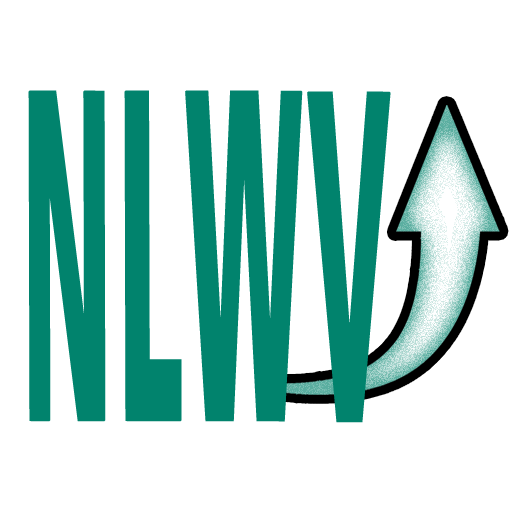
<style>
.page{position:relative;width:520px;height:520px;background:#ffffff}
.page>*{position:absolute;margin:0}
.t1{font:473.4px "Humanist777BT-BlackCondensedB";color:#01836d;font-weight:bold;scale:0.29 1}
</style>
<div class="page">
<p class="t1" style="left:28px;top:90px;width:363px;height:333px">NLWV</p>
</div>
